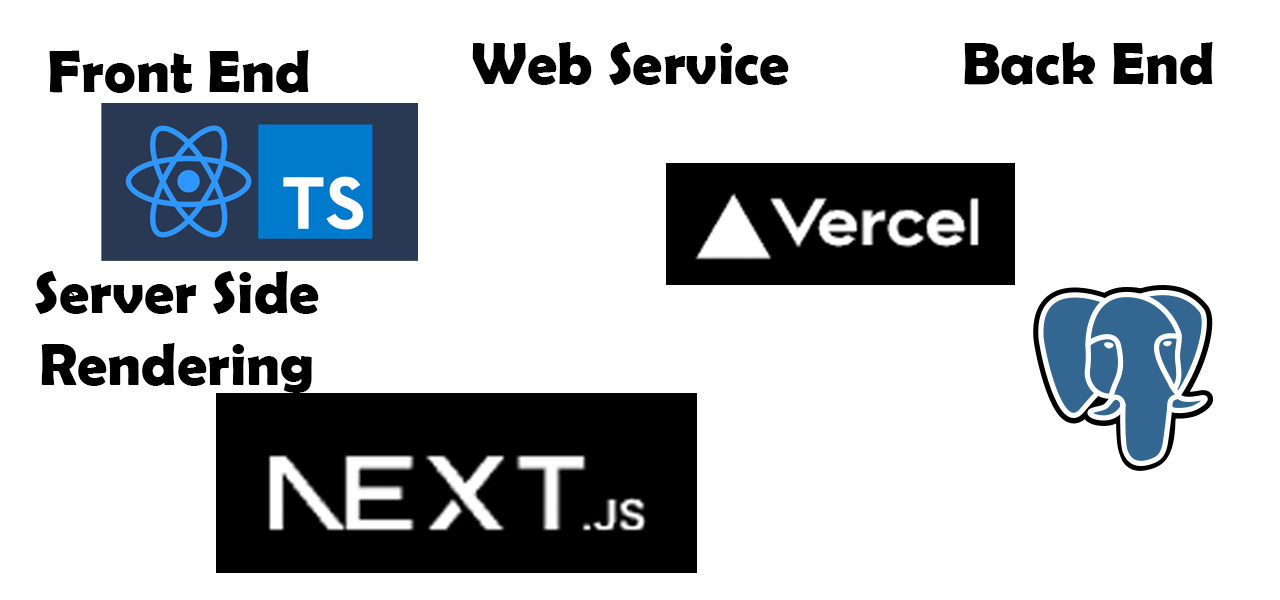
<style>
.page{position:relative;width:1280px;height:600px;background:#ffffff}
.page>*{position:absolute;margin:0}
.t1{font:60px "BerlinSansFBDemi-Bold";color:#000000}
</style>
<div class="page">
<p class="t1" style="left:49px;top:50px;width:260px;height:43px">Front End</p>
<p class="t1" style="left:472px;top:42px;width:317px;height:43px">Web Service</p>
<p class="t1" style="left:964px;top:42px;width:249px;height:43px">Back End</p>
<p class="t1" style="left:35px;top:271px;width:284px;height:122px;text-align:center">Server Side<br>Rendering</p>
</div>
